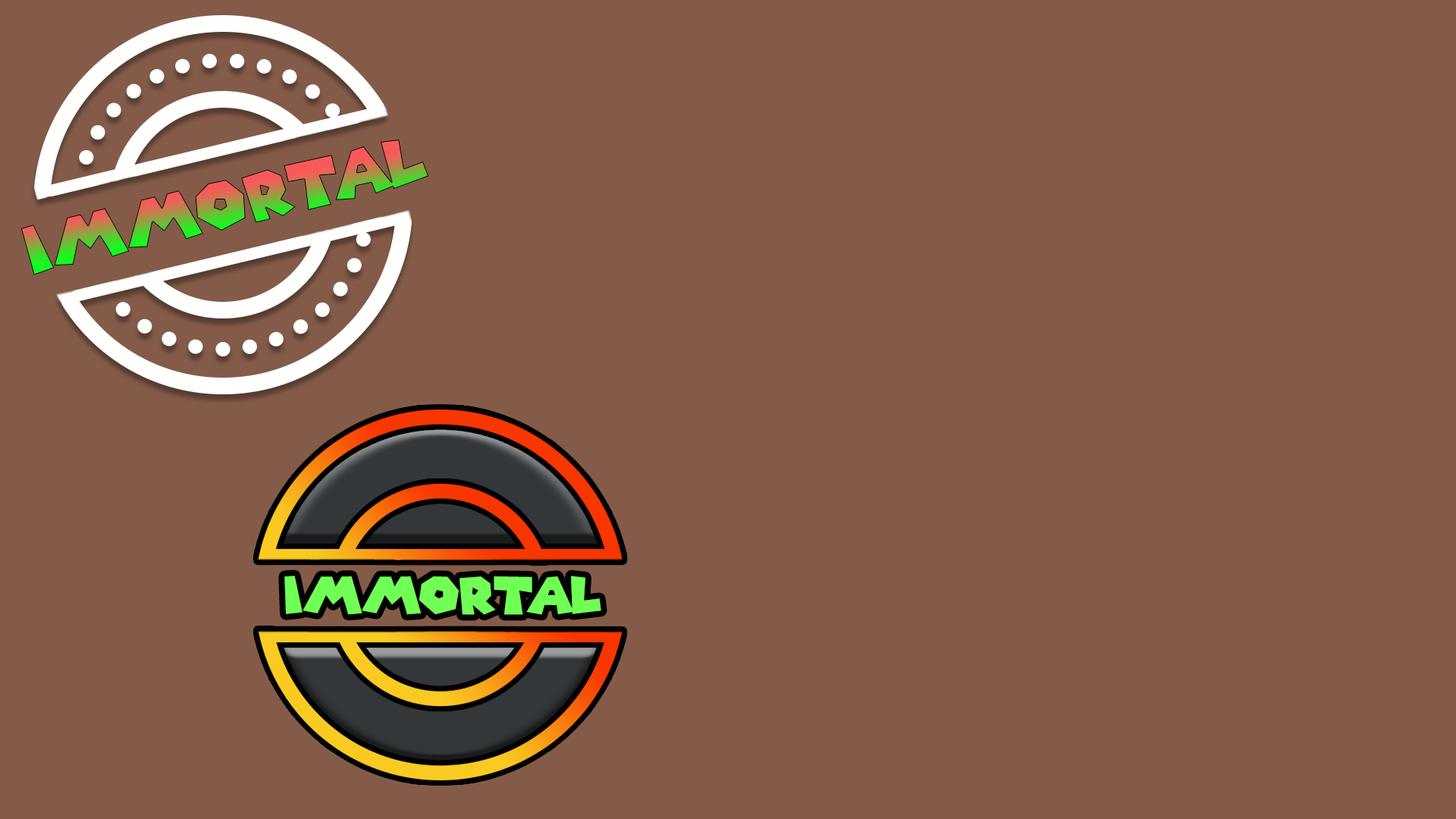
<style>
.page{position:relative;width:1456px;height:819px;background:#845b49}
.page>*{position:absolute;margin:0}
.t1{font:51px "SuperMarioGalaxy";color:#70ff54}
</style>
<div class="page">
<p class="t1" style="left:284px;top:576px;width:317px;height:39px">immortal</p>
</div>
